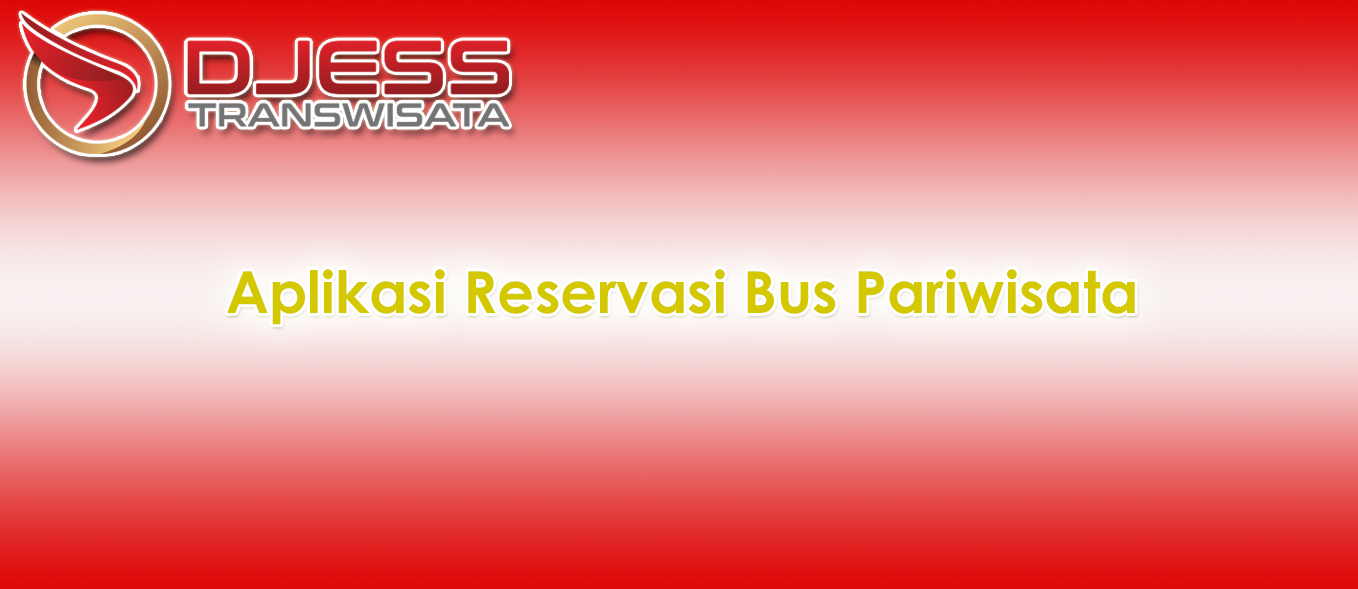
<style>
.page{position:relative;width:1358px;height:589px}
.page>*{position:absolute;margin:0}
.t1{font:58.3px "CenturyGothic-Bold";color:#d4c800}
</style>
<div class="page">
<p class="t1" style="left:227px;top:269px;width:908px;height:56px">Aplikasi Reservasi Bus Pariwisata</p>
</div>
